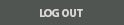
<style>
.page{position:relative;width:124px;height:25px;background:#505551}
.page>*{position:absolute;margin:0}
.t1{font:11px "MyriadHebrew-Bold";color:#dad6d6}
</style>
<div class="page">
<p class="t1" style="left:40px;top:9px;width:43px;height:8px">LOG OUT</p>
</div>
